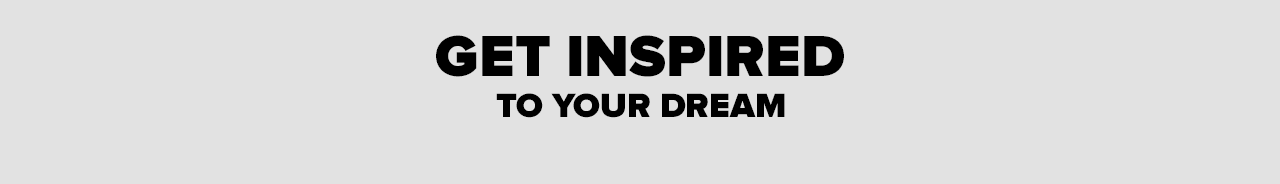
<style>
.page{position:relative;width:1280px;height:184px;background:#e2e2e2}
.page>*{position:absolute;margin:0}
.t1{font:60px "ProximaNova-Black";color:#000000}
.t2{font:35px "ProximaNova-Black";color:#000000}
</style>
<div class="page">
<p class="t1" style="left:436px;top:35px;width:408px;height:42px">GET INSPIRED</p>
<p class="t2" style="left:496px;top:93px;width:289px;height:25px">TO YOUR DREAM</p>
</div>
